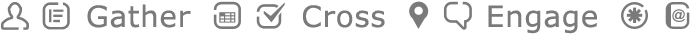
<style>
.page{position:relative;width:695px;height:36px;background:#ffffff}
.page>*{position:absolute;margin:0}
.t1{font:29.3px "Verdana";letter-spacing:0.025em;color:#7a7a7a}
</style>
<div class="page">
<p class="t1" style="left:87px;top:4px;width:510px;height:30px">Gather          Cross         Engage</p>
</div>
